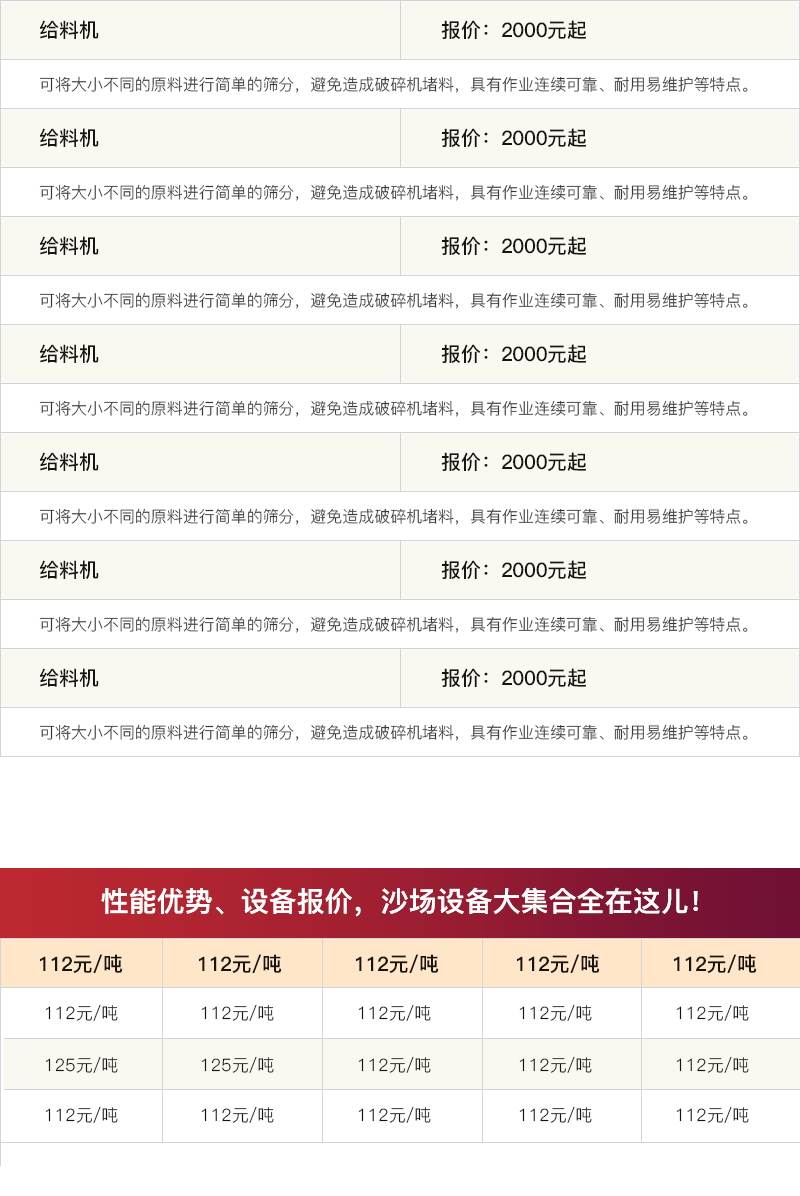
<style>
.page{position:relative;width:800px;height:1196px;background:#ffffff}
.page>*{position:absolute;margin:0}
.t1{font:20px "PingFang-SC-Bold";color:#181412;text-transform:uppercase}
.t2{font:16px "PingFang-SC-Regular";color:#3c3733;text-transform:uppercase}
.t3{font:28px "PingFang-SC-Heavy";color:#ffffff;text-transform:uppercase}
.t4{font:20px "PingFang-SC-Heavy";color:#181412;text-transform:uppercase}
.t5{font:17px "PingFang-SC-Regular";color:#181412;text-transform:uppercase}
</style>
<div class="page">
<p class="t1" style="left:39px;top:20px;width:60px;height:19px">给料机</p>
<p class="t1" style="left:441px;top:20px;width:146px;height:19px">报价：2000元起</p>
<p class="t2" style="left:39px;top:76px;width:709px;height:17px">可将大小不同的原料进行简单的筛分，避免造成破碎机堵料，具有作业连续可靠、耐用易维护等特点。</p>
<p class="t1" style="left:39px;top:128px;width:60px;height:19px">给料机</p>
<p class="t1" style="left:441px;top:128px;width:146px;height:19px">报价：2000元起</p>
<p class="t2" style="left:39px;top:184px;width:709px;height:17px">可将大小不同的原料进行简单的筛分，避免造成破碎机堵料，具有作业连续可靠、耐用易维护等特点。</p>
<p class="t1" style="left:39px;top:236px;width:60px;height:19px">给料机</p>
<p class="t1" style="left:441px;top:236px;width:146px;height:19px">报价：2000元起</p>
<p class="t2" style="left:39px;top:292px;width:709px;height:17px">可将大小不同的原料进行简单的筛分，避免造成破碎机堵料，具有作业连续可靠、耐用易维护等特点。</p>
<p class="t1" style="left:39px;top:344px;width:60px;height:19px">给料机</p>
<p class="t1" style="left:441px;top:344px;width:146px;height:19px">报价：2000元起</p>
<p class="t2" style="left:39px;top:400px;width:709px;height:17px">可将大小不同的原料进行简单的筛分，避免造成破碎机堵料，具有作业连续可靠、耐用易维护等特点。</p>
<p class="t1" style="left:39px;top:452px;width:60px;height:19px">给料机</p>
<p class="t1" style="left:441px;top:452px;width:146px;height:19px">报价：2000元起</p>
<p class="t2" style="left:39px;top:508px;width:709px;height:17px">可将大小不同的原料进行简单的筛分，避免造成破碎机堵料，具有作业连续可靠、耐用易维护等特点。</p>
<p class="t1" style="left:39px;top:560px;width:60px;height:19px">给料机</p>
<p class="t1" style="left:441px;top:560px;width:146px;height:19px">报价：2000元起</p>
<p class="t2" style="left:39px;top:616px;width:709px;height:17px">可将大小不同的原料进行简单的筛分，避免造成破碎机堵料，具有作业连续可靠、耐用易维护等特点。</p>
<p class="t1" style="left:39px;top:668px;width:60px;height:19px">给料机</p>
<p class="t1" style="left:441px;top:668px;width:146px;height:19px">报价：2000元起</p>
<p class="t2" style="left:39px;top:724px;width:709px;height:17px">可将大小不同的原料进行简单的筛分，避免造成破碎机堵料，具有作业连续可靠、耐用易维护等特点。</p>
<p class="t3" style="left:101px;top:887px;width:597px;height:30px">性能优势、设备报价，沙场设备大集合全在这儿！</p>
<p class="t4" style="left:40px;top:954px;width:83px;height:20px">112元/吨</p>
<p class="t4" style="left:199px;top:954px;width:83px;height:20px">112元/吨</p>
<p class="t4" style="left:356px;top:954px;width:83px;height:20px">112元/吨</p>
<p class="t4" style="left:517px;top:954px;width:83px;height:20px">112元/吨</p>
<p class="t4" style="left:674px;top:954px;width:83px;height:20px">112元/吨</p>
<p class="t5" style="left:45px;top:1004px;width:73px;height:17px">112元/吨</p>
<p class="t5" style="left:201px;top:1004px;width:73px;height:17px">112元/吨</p>
<p class="t5" style="left:358px;top:1004px;width:73px;height:17px">112元/吨</p>
<p class="t5" style="left:519px;top:1004px;width:73px;height:17px">112元/吨</p>
<p class="t5" style="left:676px;top:1004px;width:73px;height:17px">112元/吨</p>
<p class="t5" style="left:45px;top:1056px;width:73px;height:17px">125元/吨</p>
<p class="t5" style="left:201px;top:1056px;width:73px;height:17px">125元/吨</p>
<p class="t5" style="left:358px;top:1056px;width:73px;height:17px">112元/吨</p>
<p class="t5" style="left:519px;top:1056px;width:73px;height:17px">112元/吨</p>
<p class="t5" style="left:676px;top:1056px;width:73px;height:17px">112元/吨</p>
<p class="t5" style="left:45px;top:1106px;width:73px;height:17px">112元/吨</p>
<p class="t5" style="left:201px;top:1106px;width:73px;height:17px">112元/吨</p>
<p class="t5" style="left:358px;top:1106px;width:73px;height:17px">112元/吨</p>
<p class="t5" style="left:519px;top:1106px;width:73px;height:17px">112元/吨</p>
<p class="t5" style="left:676px;top:1106px;width:73px;height:17px">112元/吨</p>
</div>
